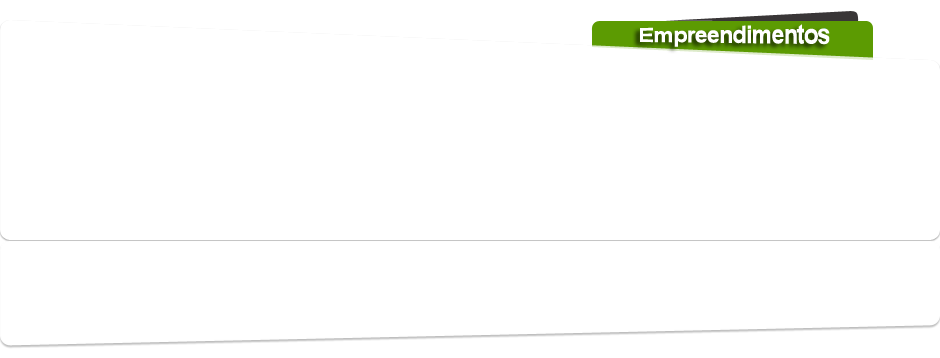
<style>
.page{position:relative;width:940px;height:358px;background:#ffffff}
.page>*{position:absolute;margin:0}
.t1{font:24px "Arial-BoldMT";letter-spacing:-0.05em;color:#ffffff}
</style>
<div class="page">
<p class="t1" style="left:640px;top:24px;width:190px;height:23px">Empreendimentos</p>
</div>
